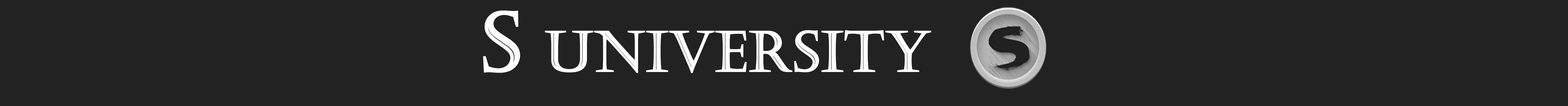
<style>
.page{position:relative;width:1568px;height:106px;background:#222222}
.page>*{position:absolute;margin:0}
.t1{font:55.5px "Castellar";color:#ffffff;font-weight:bold}
.t2{font:82.1px "Castellar";color:#ffffff;font-weight:bold}
</style>
<div class="page">
<p class="t1" style="left:483px;top:10px;width:448px;height:63px"><span class="t2">S</span> UNIVERSITY</p>
</div>
